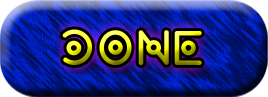
<style>
.page{position:relative;width:268px;height:97px}
.page>*{position:absolute;margin:0}
.t1{font:50px "wearealien!!"}
</style>
<div class="page">
<p class="t1" style="left:62px;top:29px;width:140px;height:36px">Done</p>
</div>
